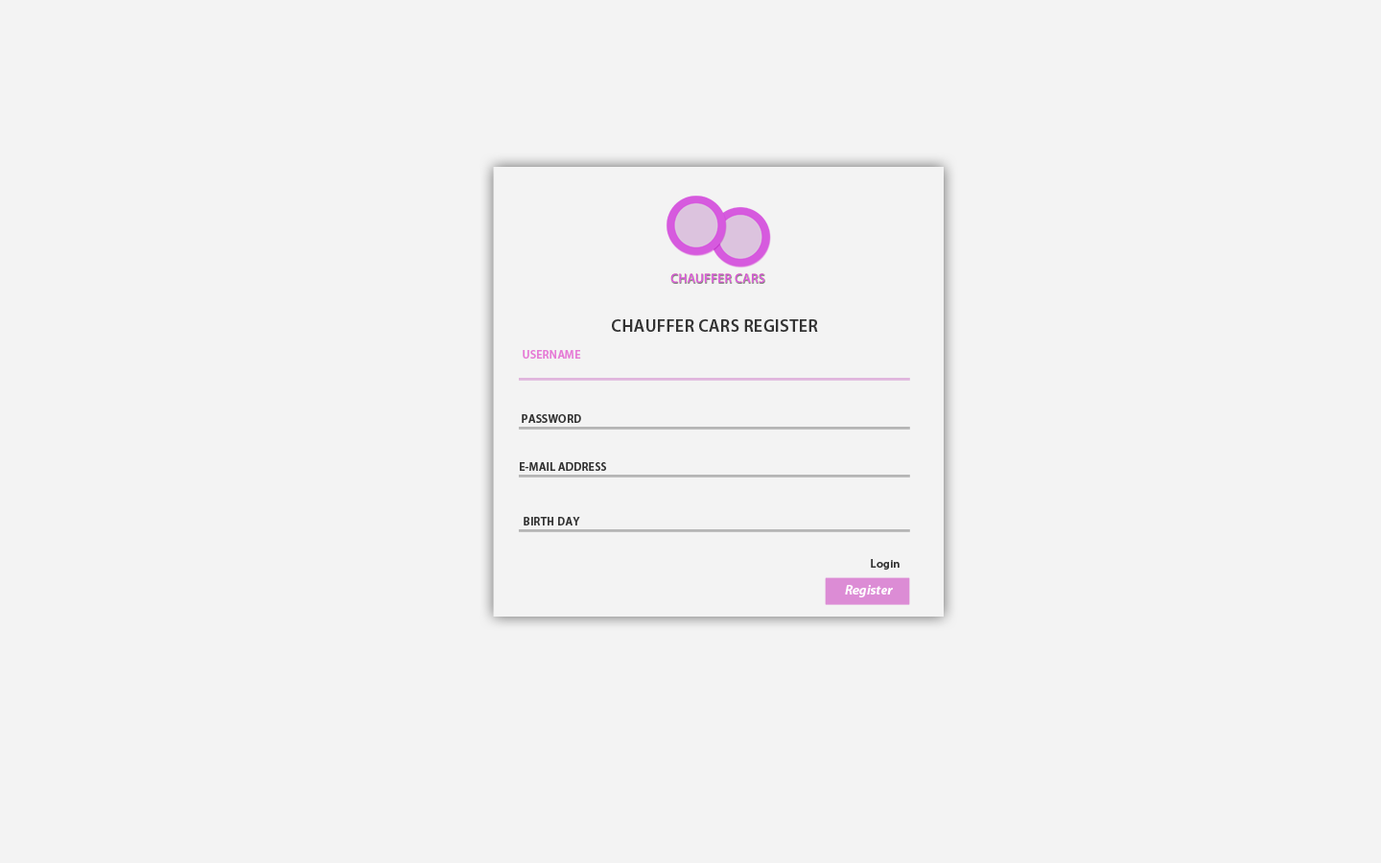
<style>
.page{position:relative;width:1381px;height:863px;background:#f3f3f3}
.page>*{position:absolute;margin:0}
.t1{font:17.3px "MyriadPro-Semibold";letter-spacing:0.02em;color:#333333}
.t2{font:11.5px "MyriadPro-Semibold";letter-spacing:0.02em;color:#e67cd6}
.t3{font:11.5px "MyriadPro-Semibold";letter-spacing:0.02em;color:#333333}
.t4{font:13.4px "MyriadPro-BoldIt";color:#ffffff}
</style>
<div class="page">
<p class="t1" style="left:612px;top:319px;width:206px;height:13px">CHAUFFER CARS REGISTER</p>
<p class="t2" style="left:523px;top:350px;width:58px;height:9px">USERNAME</p>
<p class="t3" style="left:522px;top:414px;width:59px;height:9px">PASSWORD</p>
<p class="t3" style="left:520px;top:462px;width:86px;height:9px">E-MAIL ADDRESS</p>
<p class="t3" style="left:524px;top:517px;width:56px;height:9px">BIRTH DAY</p>
<p class="t3" style="left:871px;top:559px;width:29px;height:11px">Login</p>
<p class="t4" style="left:845px;top:585px;width:48px;height:13px">Register</p>
</div>
